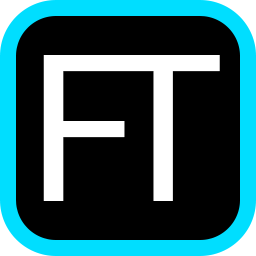
<style>
.page{position:relative;width:256px;height:256px;background:#000000}
.page>*{position:absolute;margin:0}
.t1{font:205.2px "Roboto-Regular";letter-spacing:-0.2em;color:#ffffff}
</style>
<div class="page">
<p class="t1" style="left:43px;top:55px;width:177px;height:146px">FT</p>
</div>
